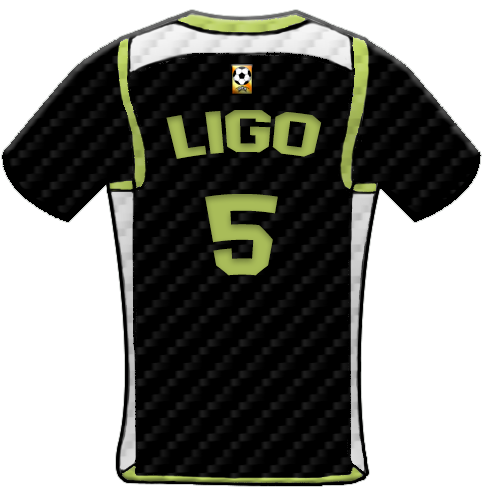
<style>
.page{position:relative;width:482px;height:494px;background:#ffffff}
.page>*{position:absolute;margin:0}
.t1{font:59.4px "AdidasHalfBlock2016";color:#a9bc59;scale:1.13 1}
.t2{font:113.8px "AdidasHalfBlock2016";color:#a9bc59}
</style>
<div class="page">
<p class="t1" style="left:166px;top:110px;width:156px;height:49px">Ligo</p>
<p class="t2" style="left:205px;top:194px;width:73px;height:82px">5</p>
</div>
